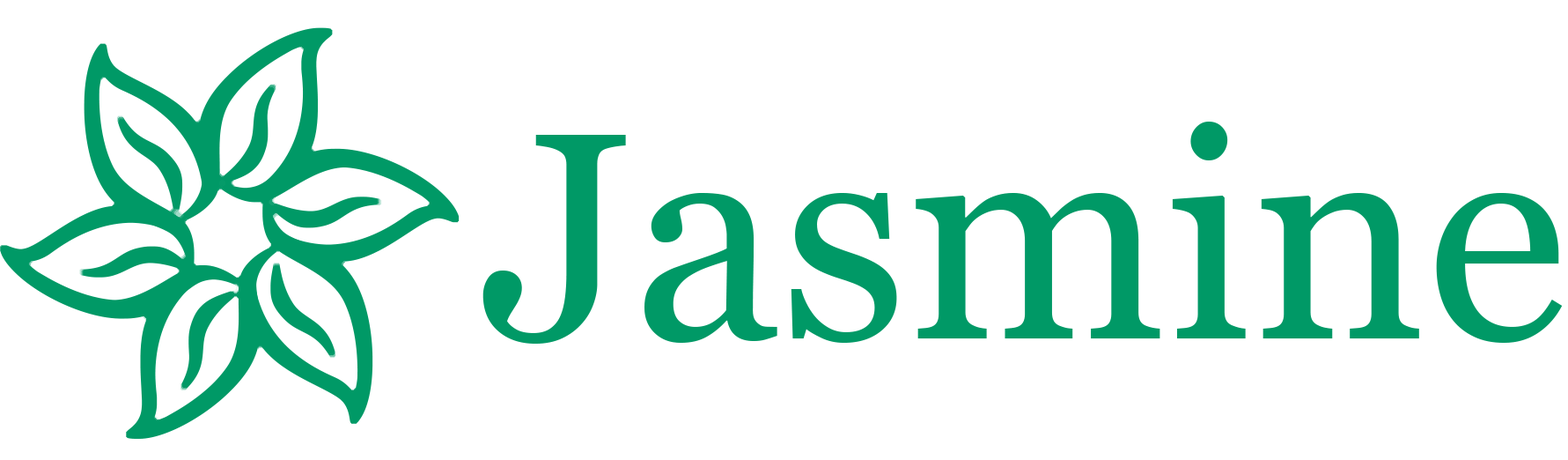
<style>
.page{position:relative;width:1568px;height:460px;background:#ffffff}
.page>*{position:absolute;margin:0}
.t1{font:293.5px "Georgia";color:#009966}
</style>
<div class="page">
<p class="t1" style="left:482px;top:121px;width:1081px;height:222px">Jasmine</p>
</div>
